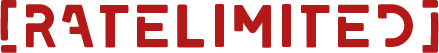
<style>
.page{position:relative;width:439px;height:53px;background:#ffffff}
.page>*{position:absolute;margin:0}
.t1{font:60px "LEIXO-Bold";color:#b41919}
</style>
<div class="page">
<p class="t1" style="left:0px;top:0px;width:439px;height:53px">[RATELIMITED]</p>
</div>
